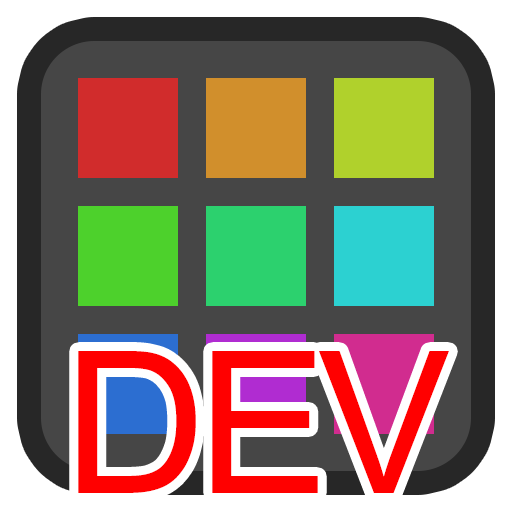
<style>
.page{position:relative;width:512px;height:512px;background:#464646}
.page>*{position:absolute;margin:0}
.t1{font:198px "ArialMT";letter-spacing:-0.05em;color:#ff0000}
</style>
<div class="page">
<p class="t1" style="left:78px;top:351px;width:371px;height:142px">DEV</p>
</div>
